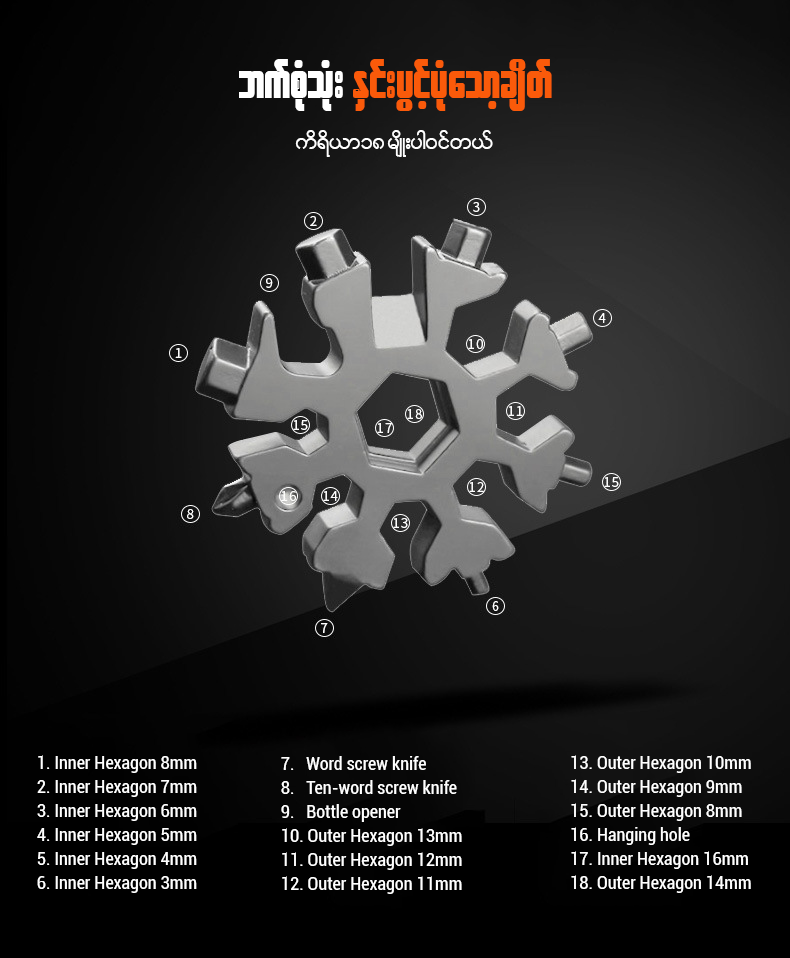
<style>
.page{position:relative;width:790px;height:958px}
.page>*{position:absolute;margin:0}
.t1{font:52.3px "W30ArtHouse";color:#fa5a0a}
.t2{font:52.3px "W30ArtHouse";color:#ffffff}
.t3{font:29.9px "W01ArtHouseWin";color:#ffffff}
.t4{font:18px/24px "Roboto-Condensed";color:#ffffff}
</style>
<div class="page">
<p class="t1" style="left:239px;top:59px;width:313px;height:52px"><span class="t2">bufpHkoHk; </span>ESif;yGifhyHkaomhcsdwf</p>
<p class="t3" style="left:295px;top:130px;width:198px;height:27px">ud&amp;d,m18 rsdK;yg0ifw,f</p>
<p class="t4" style="left:37px;top:755px;width:160px;height:138px">1. Inner Hexagon 8mm<br>2. Inner Hexagon 7mm<br>3. Inner Hexagon 6mm<br>4. Inner Hexagon 5mm<br>5. Inner Hexagon 4mm<br>6. Inner Hexagon 3mm</p>
<p class="t4" style="left:281px;top:756px;width:181px;height:138px">7.   Word screw knife<br>8.   Ten-word screw knife<br>9.   Bottle opener<br>10. Outer Hexagon 13mm<br>11. Outer Hexagon 12mm<br>12. Outer Hexagon 11mm</p>
<p class="t4" style="left:571px;top:755px;width:180px;height:138px">13. Outer Hexagon 10mm<br>14. Outer Hexagon 9mm<br>15. Outer Hexagon 8mm<br>16. Hanging hole<br>17. Inner Hexagon 16mm<br>18. Outer Hexagon 14mm</p>
</div>
